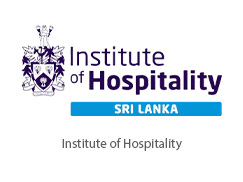
<style>
.page{position:relative;width:243px;height:182px;background:#ffffff}
.page>*{position:absolute;margin:0}
.t1{font:13px "MyriadPro-Regular";color:#5f5f5f}
</style>
<div class="page">
<p class="t1" style="left:62px;top:138px;width:120px;height:13px">Institute of Hospitality</p>
</div>
